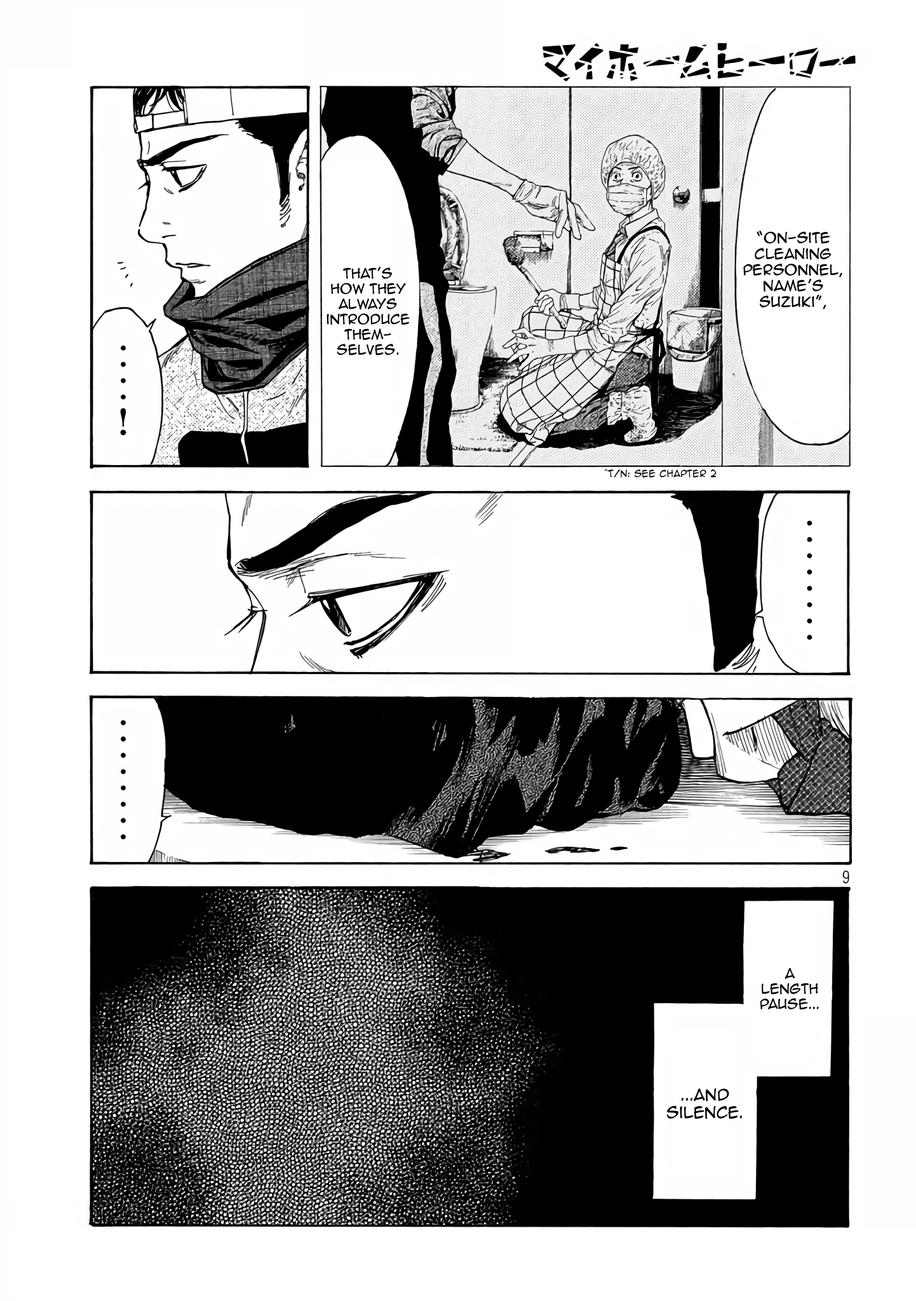
<style>
.page{position:relative;width:916px;height:1301px;background:#ffffff}
.page>*{position:absolute;margin:0}
.t1{font:13.3px "AnimeAce2.0BB";color:#000000}
.t2{font:12.7px "AnimeAce2.0BB";color:#000000}
.t3{font:8.9px "AnimeAce2.0BB";color:#000000}
.t4{font:14.6px "AnimeAce2.0BB";color:#000000}
</style>
<div class="page">
<p class="t1" style="left:743px;top:231px;width:100px;height:78px;text-align:center">“On-site cleaning personnel, name’s Suzuki”,</p>
<p class="t2" style="left:327px;top:267px;width:83px;height:88px;text-align:center">That’s <br>how they always introduce them-<br>selves.</p>
<p class="t3" style="left:604px;top:469px;width:113px;height:9px">^T/N: See Chapter 2</p>
<p class="t2" style="left:760px;top:968px;width:59px;height:42px;text-align:center">A <br>length pause...</p>
<p class="t4" style="left:667px;top:1088px;width:75px;height:32px;text-align:center">...and silence.</p>
</div>
